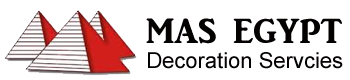
<style>
.page{position:relative;width:350px;height:80px;background:#ffffff}
.page>*{position:absolute;margin:0}
.t1{font:36px "ARJULIAN";color:#040101}
.t2{font:22px "ArialMT";color:#040101}
</style>
<div class="page">
<p class="t1" style="left:146px;top:18px;width:196px;height:26px">MAS EGYPT</p>
<p class="t2" style="left:148px;top:52px;width:195px;height:17px">Decoration Servcies</p>
</div>
